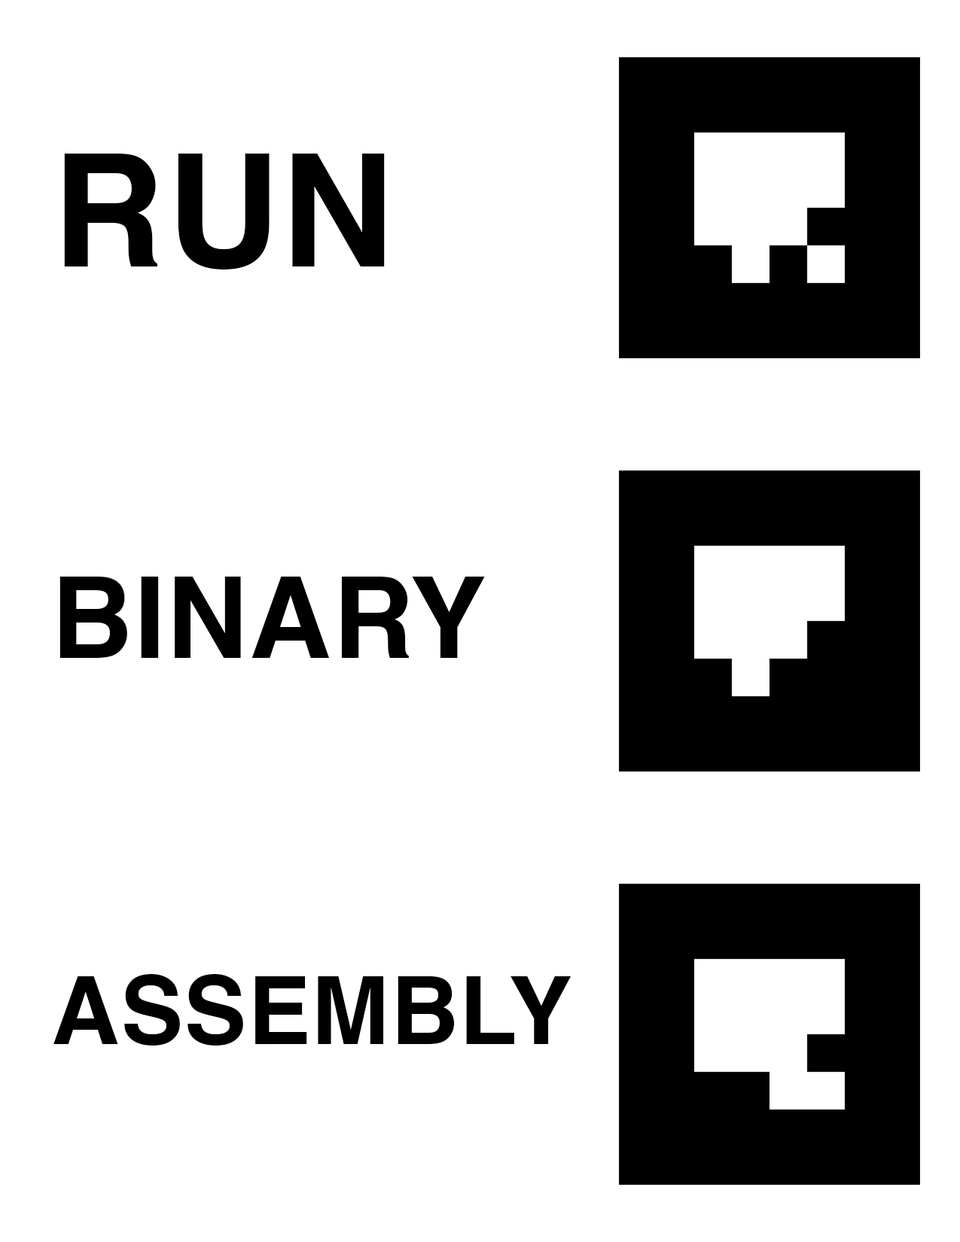
<style>
.page{position:relative;width:960px;height:1242px;background:#ffffff}
.page>*{position:absolute;margin:0}
.t1{font:157px "Helvetica-Bold";letter-spacing:0.01em;color:#000000}
.t2{font:112.9px "Helvetica-Bold";letter-spacing:0.01em;color:#000000}
.t3{font:94.1px "Helvetica-Bold";letter-spacing:0.01em;color:#000000}
</style>
<div class="page">
<p class="t1" style="left:64px;top:154px;width:321px;height:116px">RUN</p>
<p class="t2" style="left:59px;top:577px;width:426px;height:81px">BINARY</p>
<p class="t3" style="left:53px;top:974px;width:518px;height:72px">ASSEMBLY</p>
</div>
